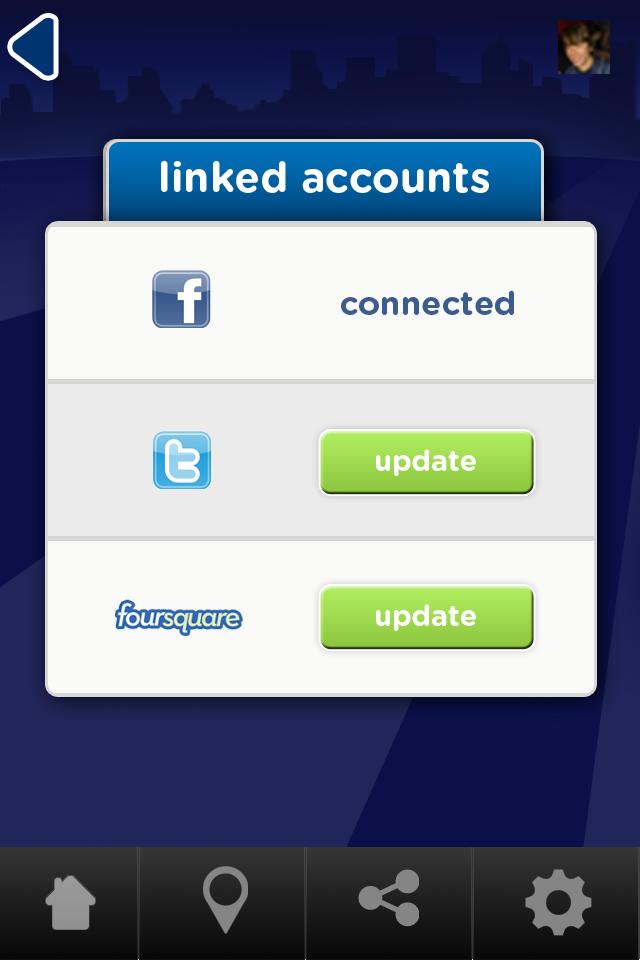
<style>
.page{position:relative;width:640px;height:960px;background:#fafaf9}
.page>*{position:absolute;margin:0}
.t1{font:42px "GothamRounded-Bold";color:#ffffff}
.t2{font:33px "GothamRounded-Bold";color:#3c5c8f}
.t3{font:28.9px "GothamRounded-Bold";color:#ffffff}
</style>
<div class="page">
<p class="t1" style="left:161px;top:160px;width:328px;height:33px">linked accounts</p>
<p class="t2" style="left:341px;top:290px;width:173px;height:25px">connected</p>
<p class="t3" style="left:376px;top:449px;width:100px;height:27px">update</p>
<p class="t3" style="left:376px;top:604px;width:100px;height:27px">update</p>
</div>
